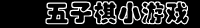
<style>
.page{position:relative;width:200px;height:28px;background:#000000}
.page>*{position:absolute;margin:0}
.t1{font:24px "STCaiyun";color:#ffffff}
</style>
<div class="page">
<p class="t1" style="left:45px;top:1px;width:144px;height:24px">五子棋小游戏</p>
</div>
